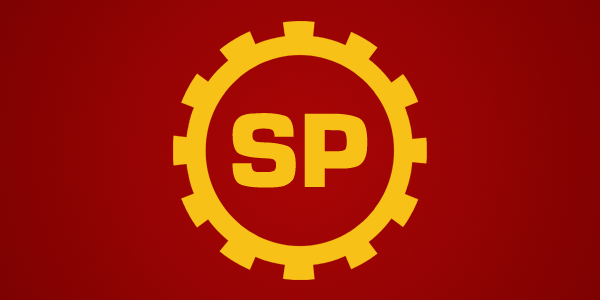
<style>
.page{position:relative;width:600px;height:300px}
.page>*{position:absolute;margin:0}
.t1{font:110px "Eurostile-Black";color:#f8c118}
</style>
<div class="page">
<p class="t1" style="left:232px;top:113px;width:136px;height:75px">SP</p>
</div>
